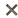
<style>
.page{position:relative;width:18px;height:18px;background:#ffffff}
.page>*{position:absolute;margin:0}
.t1{font:22px "RyuminPro-ExBold";letter-spacing:-0.08em}
</style>
<div class="page">
<p class="t1" style="left:6px;top:4px;width:12px;height:12px">×</p>
</div>
